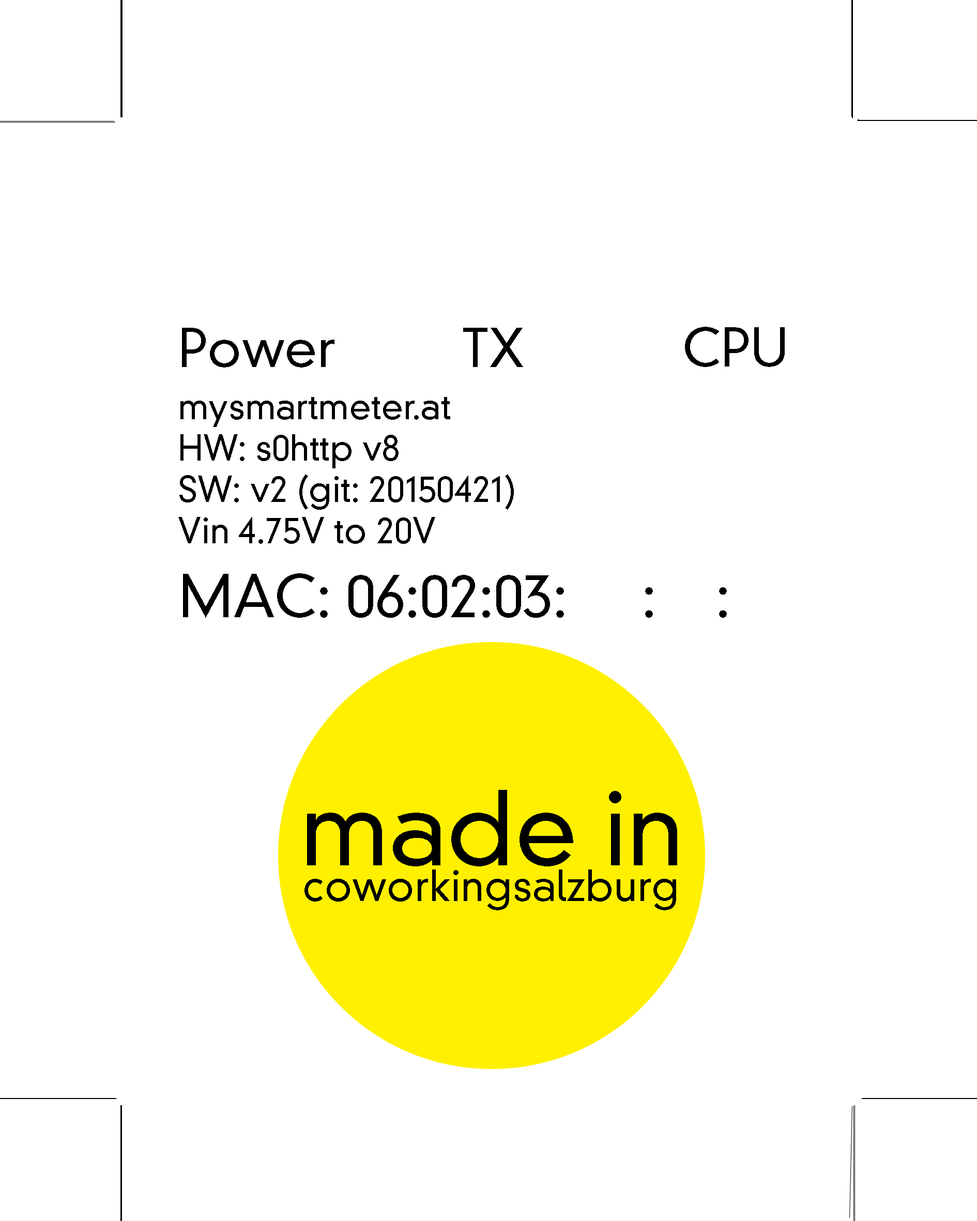
<style>
.page{position:relative;width:977px;height:1221px;background:#ffffff}
.page>*{position:absolute;margin:0}
.t1{font:51.7px "DINNeuzeitGroteskStd-Light";color:#000000}
.t2{font:34.5px "DINNeuzeitGroteskStd-Light";color:#000000}
.t3{font:56.9px "DINNeuzeitGroteskStd-Light";color:#000000}
.t4{font:99.2px "DINNeuzeitGroteskStd-Light";color:#000000}
.t5{font:41.7px "DINNeuzeitGroteskStd-Light";color:#000000}
</style>
<div class="page">
<p class="t1" style="left:182px;top:328px;width:152px;height:39px">Power</p>
<p class="t1" style="left:463px;top:328px;width:60px;height:39px">TX</p>
<p class="t1" style="left:685px;top:327px;width:100px;height:40px">CPU</p>
<p class="t2" style="left:178px;top:397px;width:336px;height:147px">mysmartmeter.at<br>HW: s0http v8<br>SW: v2 (git: 20150421)<br>Vin 4.75V to 20V</p>
<p class="t3" style="left:183px;top:573px;width:544px;height:45px">MAC: 06:02:03:     :    :</p>
<p class="t4" style="left:307px;top:790px;width:370px;height:76px">made in</p>
<p class="t5" style="left:304px;top:869px;width:372px;height:41px">coworkingsalzburg</p>
</div>
